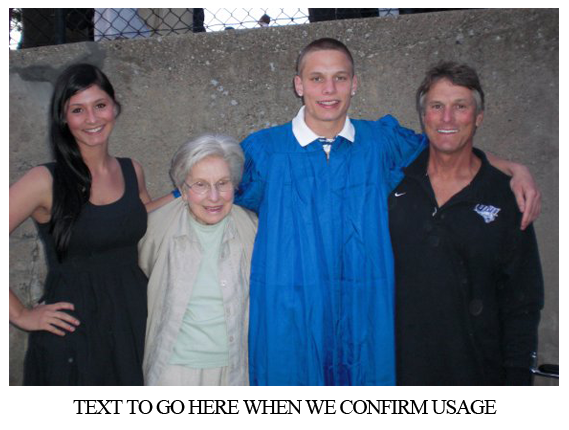
<style>
.page{position:relative;width:569px;height:430px}
.page>*{position:absolute;margin:0}
.t1{font:20.8px "TimesNewRomanPSMT";letter-spacing:-0.05em;color:#000000}
</style>
<div class="page">
<p class="t1" style="left:73px;top:400px;width:424px;height:14px">TEXT TO GO HERE WHEN WE CONFIRM USAGE</p>
</div>
